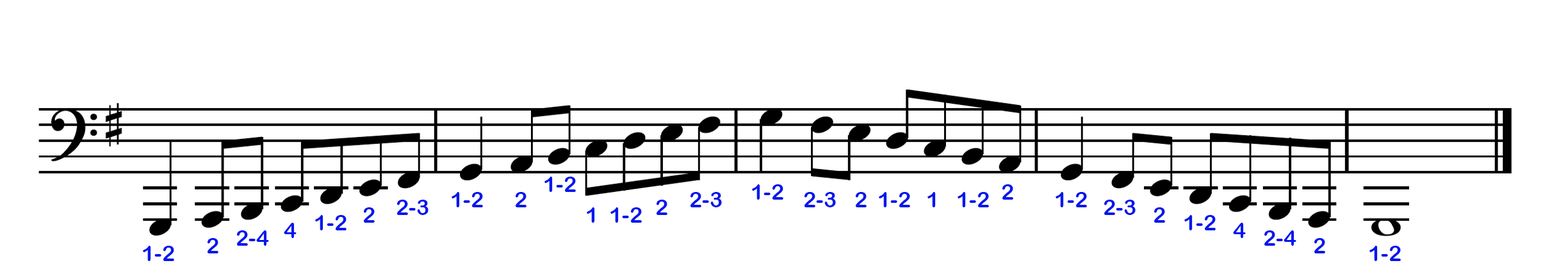
<style>
.page{position:relative;width:1568px;height:279px;background:#ffffff}
.page>*{position:absolute;margin:0}
.t1{font:21.8px "ArialRoundedMTBold";color:#0417ec}
</style>
<div class="page">
<p class="t1" style="left:544px;top:177px;width:32px;height:15px">1-2</p>
<p class="t1" style="left:752px;top:184px;width:31px;height:16px">1-2</p>
<p class="t1" style="left:1002px;top:184px;width:11px;height:16px">2</p>
<p class="t1" style="left:452px;top:192px;width:31px;height:16px">1-2</p>
<p class="t1" style="left:515px;top:192px;width:12px;height:16px">2</p>
<p class="t1" style="left:690px;top:192px;width:32px;height:16px">2-3</p>
<p class="t1" style="left:804px;top:192px;width:32px;height:16px">2-3</p>
<p class="t1" style="left:855px;top:192px;width:12px;height:16px">2</p>
<p class="t1" style="left:879px;top:192px;width:31px;height:16px">1-2</p>
<p class="t1" style="left:927px;top:192px;width:9px;height:16px">1</p>
<p class="t1" style="left:958px;top:192px;width:31px;height:16px">1-2</p>
<p class="t1" style="left:1056px;top:192px;width:31px;height:16px">1-2</p>
<p class="t1" style="left:363px;top:208px;width:12px;height:15px">2</p>
<p class="t1" style="left:396px;top:200px;width:33px;height:15px">2-3</p>
<p class="t1" style="left:587px;top:208px;width:8px;height:15px">1</p>
<p class="t1" style="left:610px;top:208px;width:32px;height:15px">1-2</p>
<p class="t1" style="left:656px;top:200px;width:11px;height:15px">2</p>
<p class="t1" style="left:1104px;top:200px;width:32px;height:15px">2-3</p>
<p class="t1" style="left:1154px;top:208px;width:11px;height:15px">2</p>
<p class="t1" style="left:315px;top:215px;width:32px;height:16px">1-2</p>
<p class="t1" style="left:1184px;top:215px;width:32px;height:16px">1-2</p>
<p class="t1" style="left:236px;top:231px;width:33px;height:15px">2-4</p>
<p class="t1" style="left:284px;top:223px;width:13px;height:15px">4</p>
<p class="t1" style="left:1233px;top:223px;width:13px;height:15px">4</p>
<p class="t1" style="left:1264px;top:231px;width:32px;height:15px">2-4</p>
<p class="t1" style="left:143px;top:246px;width:31px;height:15px">1-2</p>
<p class="t1" style="left:207px;top:238px;width:11px;height:16px">2</p>
<p class="t1" style="left:1314px;top:238px;width:11px;height:16px">2</p>
<p class="t1" style="left:1369px;top:246px;width:32px;height:15px">1-2</p>
</div>
